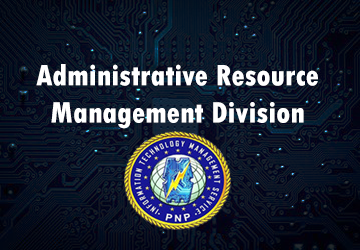
<style>
.page{position:relative;width:360px;height:250px}
.page>*{position:absolute;margin:0}
.t1{font:31px "TwCenMT-CondensedExtraBold";color:#ffffff}
</style>
<div class="page">
<p class="t1" style="left:36px;top:64px;width:282px;height:65px;text-align:center">Administrative Resource Management Division</p>
</div>
